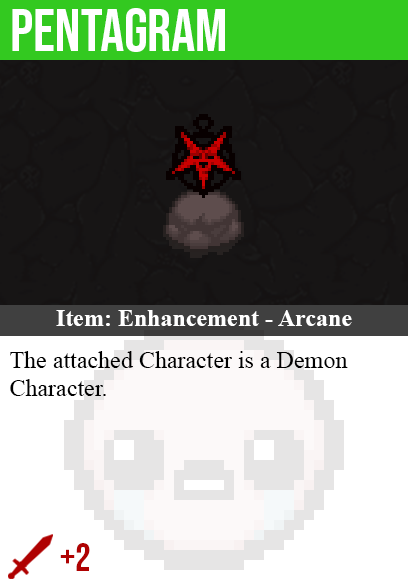
<style>
.page{position:relative;width:408px;height:585px;background:#171515}
.page>*{position:absolute;margin:0}
.t1{font:60px "BebasNeue-Regular";color:#ffffff}
.t2{font:24px "TimesNewRomanPS-BoldMT";color:#ffffff}
.t3{font:24px "TimesNewRomanPSMT";color:#000000}
.t4{font:40px "BebasNeue-Regular";color:#af0202}
</style>
<div class="page">
<p class="t1" style="left:12px;top:8px;width:213px;height:44px">pentagram</p>
<p class="t2" style="left:56px;top:310px;width:296px;height:16px">Item: Enhancement - Arcane</p>
<p class="t3" style="left:10px;top:351px;width:338px;height:45px">The attached Character is a Demon<br>Character.</p>
<p class="t4" style="left:60px;top:543px;width:30px;height:28px">+2</p>
</div>
